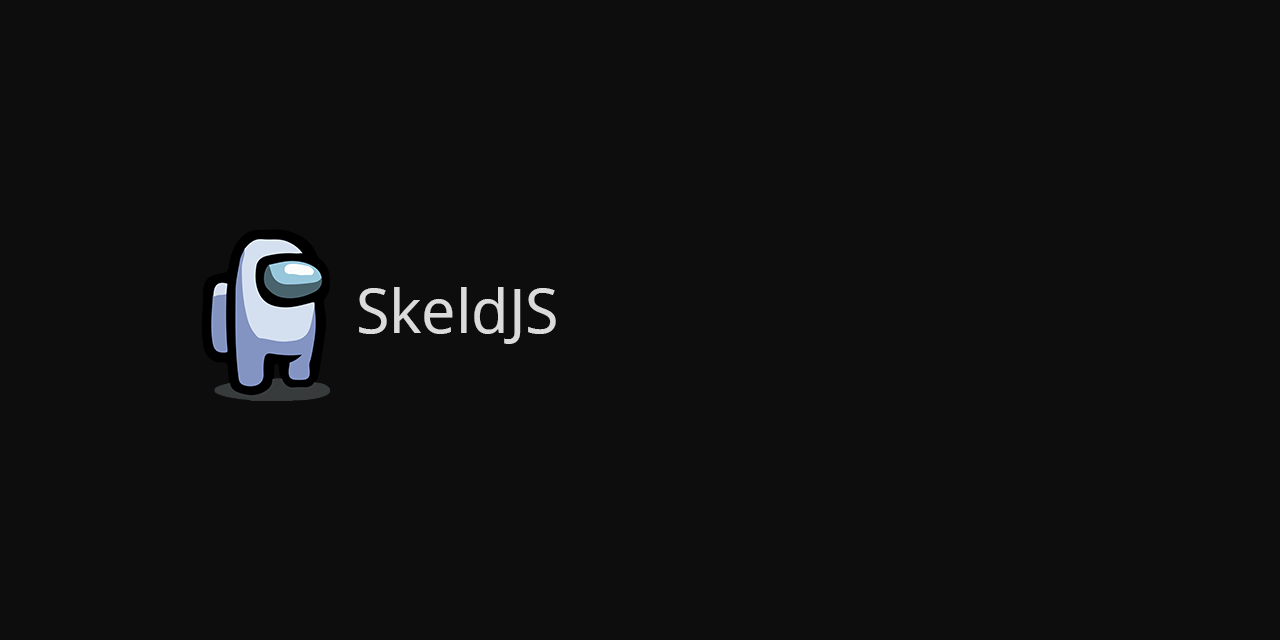
<style>
.page{position:relative;width:1280px;height:640px;background:#0d0d0d}
.page>*{position:absolute;margin:0}
.t1{font:60.8px "NotoSans";color:#dbdbdb}
</style>
<div class="page">
<p class="t1" style="left:359px;top:287px;width:197px;height:57px">SkeldJS</p>
</div>
